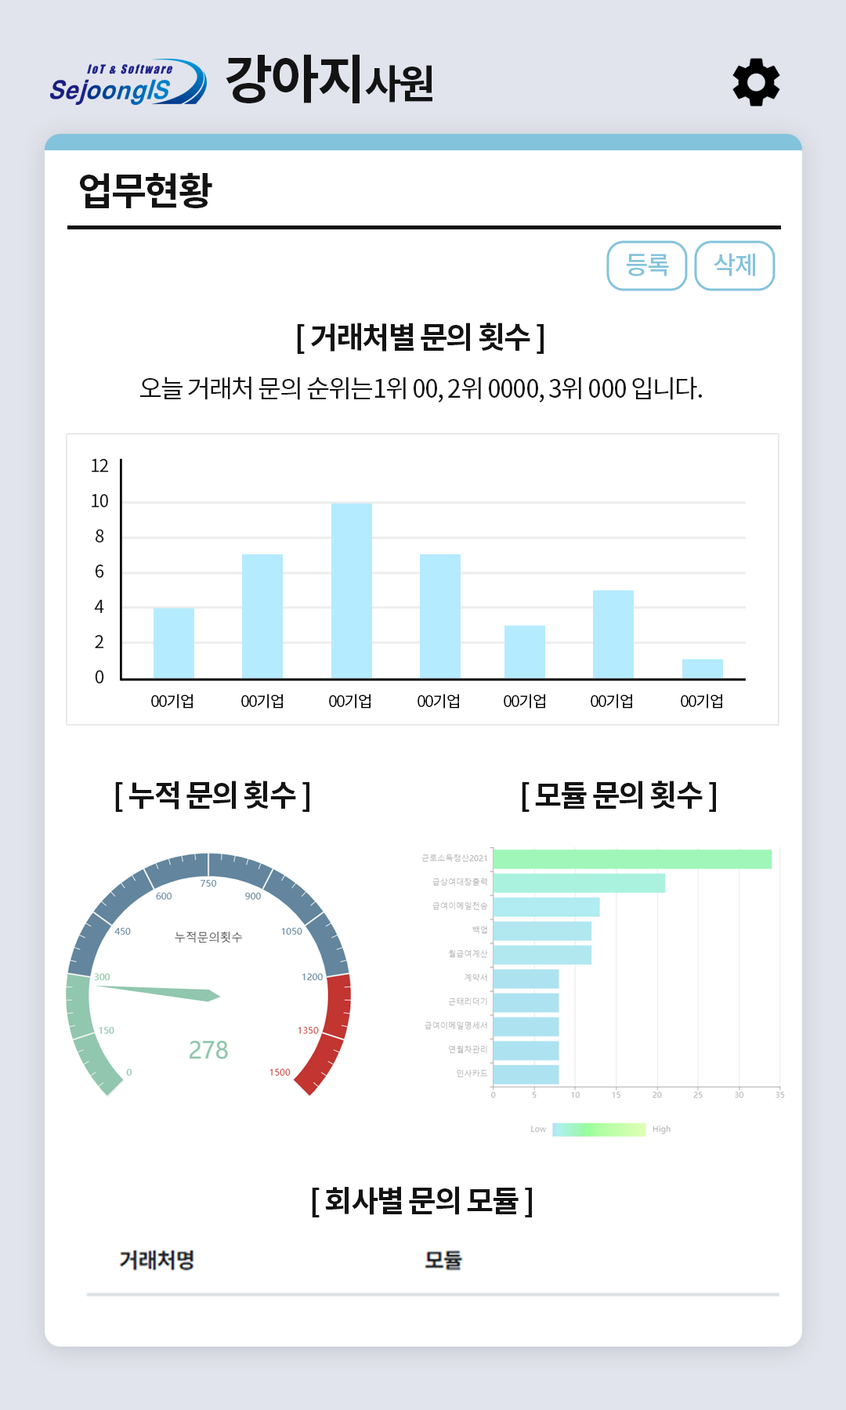
<style>
.page{position:relative;width:846px;height:1410px;background:#ffffff}
.page>*{position:absolute;margin:0}
.t1{font:52.9px "NotoSansCJKkr-Bold";letter-spacing:-0.05em;color:#131313}
.t2{font:40.3px "NotoSansCJKkr-Bold";letter-spacing:-0.05em;color:#131313}
.t3{font:38.4px "NotoSansCJKkr-Bold";letter-spacing:-0.05em;color:#131313}
.t4{font:25.1px "NotoSansCJKkr-Medium";letter-spacing:-0.05em;color:#84c3dc}
.t5{font:30px "NotoSansCJKkr-Bold";letter-spacing:-0.05em;color:#131313}
.t6{font:25.4px "NotoSansCJKkr-Regular";letter-spacing:-0.05em;color:#131313}
.t7{font:17.7px/35.2px "NotoSansCJKkr-Regular";letter-spacing:-0.05em;color:#131313}
.t8{font:15.7px "NotoSansCJKkr-Regular";letter-spacing:-0.05em;color:#000000}
</style>
<div class="page">
<p class="t1" style="left:225px;top:54px;width:207px;height:49px">강아지<span class="t2">사원</span></p>
<p class="t3" style="left:80px;top:172px;width:132px;height:36px">업무현황</p>
<p class="t4" style="left:626px;top:254px;width:43px;height:22px">등록</p>
<p class="t4" style="left:713px;top:253px;width:42px;height:23px">삭제</p>
<p class="t5" style="left:297px;top:323px;width:246px;height:31px">[ 거래처별 문의 횟수 ]</p>
<p class="t6" style="left:140px;top:377px;width:562px;height:26px">오늘 거래처 문의 순위는1위 00, 2위 0000, 3위 000 입니다.</p>
<p class="t7" style="left:92px;top:459px;width:16px;height:225px;text-align:center">12<br>10<br>8<br>6<br>4<br>2<br>0</p>
<p class="t8" style="left:151px;top:694px;width:42px;height:15px">00기업</p>
<p class="t8" style="left:241px;top:694px;width:42px;height:15px">00기업</p>
<p class="t8" style="left:329px;top:694px;width:41px;height:15px">00기업</p>
<p class="t8" style="left:417px;top:694px;width:42px;height:15px">00기업</p>
<p class="t8" style="left:503px;top:694px;width:42px;height:15px">00기업</p>
<p class="t8" style="left:590px;top:694px;width:42px;height:15px">00기업</p>
<p class="t8" style="left:680px;top:694px;width:42px;height:15px">00기업</p>
<p class="t5" style="left:115px;top:781px;width:194px;height:31px">[ 누적 문의 횟수 ]</p>
<p class="t5" style="left:521px;top:781px;width:195px;height:31px">[ 모듈 문의 횟수 ]</p>
<p class="t5" style="left:312px;top:1186px;width:220px;height:32px">[ 회사별 문의 모듈 ]</p>
</div>
